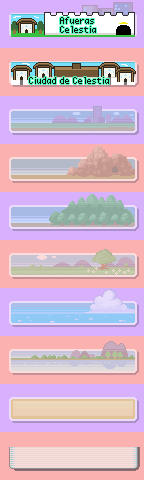
<style>
.page{position:relative;width:144px;height:480px;background:#fcb1b1}
.page>*{position:absolute;margin:0}
.t1{font:11px "Power-Green-Small";color:#131313}
</style>
<div class="page">
<p class="t1" style="left:60px;top:17px;width:36px;height:16px">Afueras <br>Celestia</p>
<p class="t1" style="left:29px;top:77px;width:80px;height:7px">Ciudad de Celestia</p>
</div>
